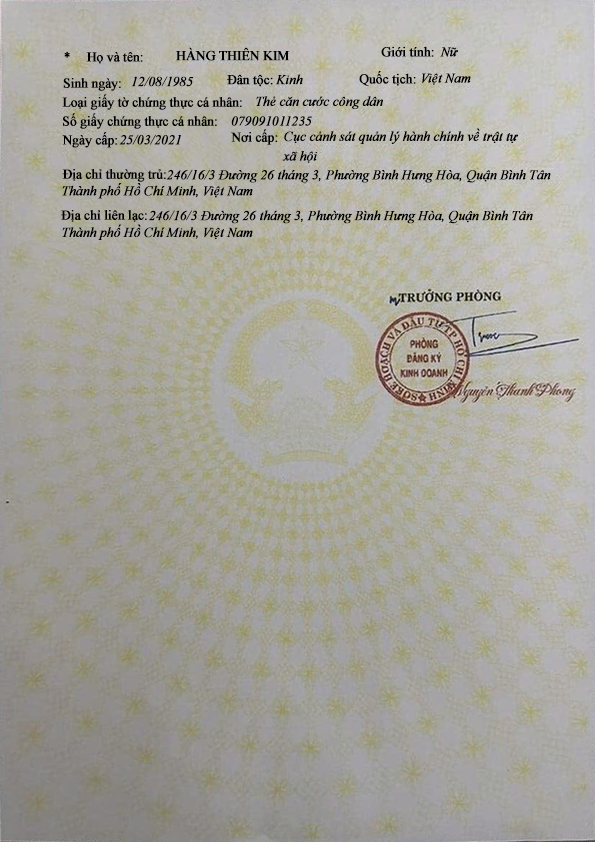
<style>
.page{position:relative;width:595px;height:842px}
.page>*{position:absolute;margin:0}
.t1{font:13.8px "TimesNewRomanPSMT";letter-spacing:-0.05em;color:#000000;font-weight:bold}
.t2{font:13.8px "TimesNewRomanPSMT";letter-spacing:-0.025em;color:#000000;font-weight:bold}
.t3{font:13.8px "TimesNewRomanPS-ItalicMT";letter-spacing:-0.025em;color:#000000;font-weight:bold}
</style>
<div class="page">
<p class="t1" style="left:64px;top:51px;width:6px;height:7px">*</p>
<p class="t2" style="left:86px;top:52px;width:57px;height:12px">Họ và tên:</p>
<p class="t2" style="left:176px;top:47px;width:114px;height:14px">HÀNG THIÊN KIM</p>
<p class="t2" style="left:381px;top:46px;width:53px;height:11px">Giới tính:</p>
<p class="t3" style="left:440px;top:47px;width:18px;height:10px">Nữ</p>
<p class="t2" style="left:63px;top:78px;width:58px;height:13px">Sinh ngày:</p>
<p class="t3" style="left:131px;top:76px;width:63px;height:11px">12/08/1985</p>
<p class="t2" style="left:227px;top:74px;width:46px;height:13px">Đân tộc:</p>
<p class="t3" style="left:275px;top:74px;width:28px;height:11px">Kinh</p>
<p class="t2" style="left:359px;top:71px;width:57px;height:15px">Quốc tịch:</p>
<p class="t3" style="left:422px;top:73px;width:49px;height:12px">Việt Nam</p>
<p class="t2" style="left:62px;top:94px;width:180px;height:16px">Loại giấy tờ chứng thực cá nhân:</p>
<p class="t3" style="left:256px;top:96px;width:127px;height:13px">Thẻ căn cước công dân</p>
<p class="t2" style="left:63px;top:113px;width:154px;height:16px">Số giấy chứng thực cá nhân:</p>
<p class="t3" style="left:231px;top:116px;width:81px;height:10px">079091011235</p>
<p class="t2" style="left:62px;top:132px;width:55px;height:16px">Ngày cấp:</p>
<p class="t3" style="left:119px;top:134px;width:62px;height:11px">25/03/2021</p>
<p class="t2" style="left:231px;top:129px;width:47px;height:16px">Nơi cấp:</p>
<p class="t3" style="left:284px;top:128px;width:234px;height:16px">Cục cảnh sát quản lý hành chính về trật tự</p>
<p class="t3" style="left:282px;top:151px;width:35px;height:12px">xã hội</p>
<p class="t2" style="left:62px;top:169px;width:104px;height:13px">Địa chỉ thường trủ:</p>
<p class="t3" style="left:166px;top:169px;width:385px;height:14px">246/16/3 Đường 26 tháng 3, Phường Bình Hưng Hòa, Quận Bình Tân</p>
<p class="t3" style="left:62px;top:183px;width:191px;height:16px">Thành phố Hồ Chí Minh, Việt Nam</p>
<p class="t2" style="left:61px;top:210px;width:86px;height:12px">Địa chỉ liên lạc:</p>
<p class="t3" style="left:149px;top:210px;width:384px;height:14px">246/16/3 Đường 26 tháng 3, Phường Bình Hưng Hòa, Quận Bình Tân</p>
<p class="t3" style="left:62px;top:224px;width:191px;height:16px">Thành phố Hồ Chí Minh, Việt Nam</p>
</div>
